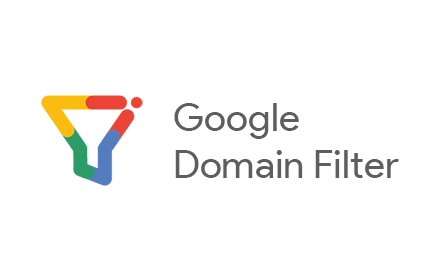
<style>
.page{position:relative;width:440px;height:280px;background:#ffffff}
.page>*{position:absolute;margin:0}
.t1{font:39.4px "ProductSans-Regular";color:#5e5e5e}
</style>
<div class="page">
<p class="t1" style="left:174px;top:103px;width:225px;height:75px">Google<br>Domain Filter</p>
</div>
